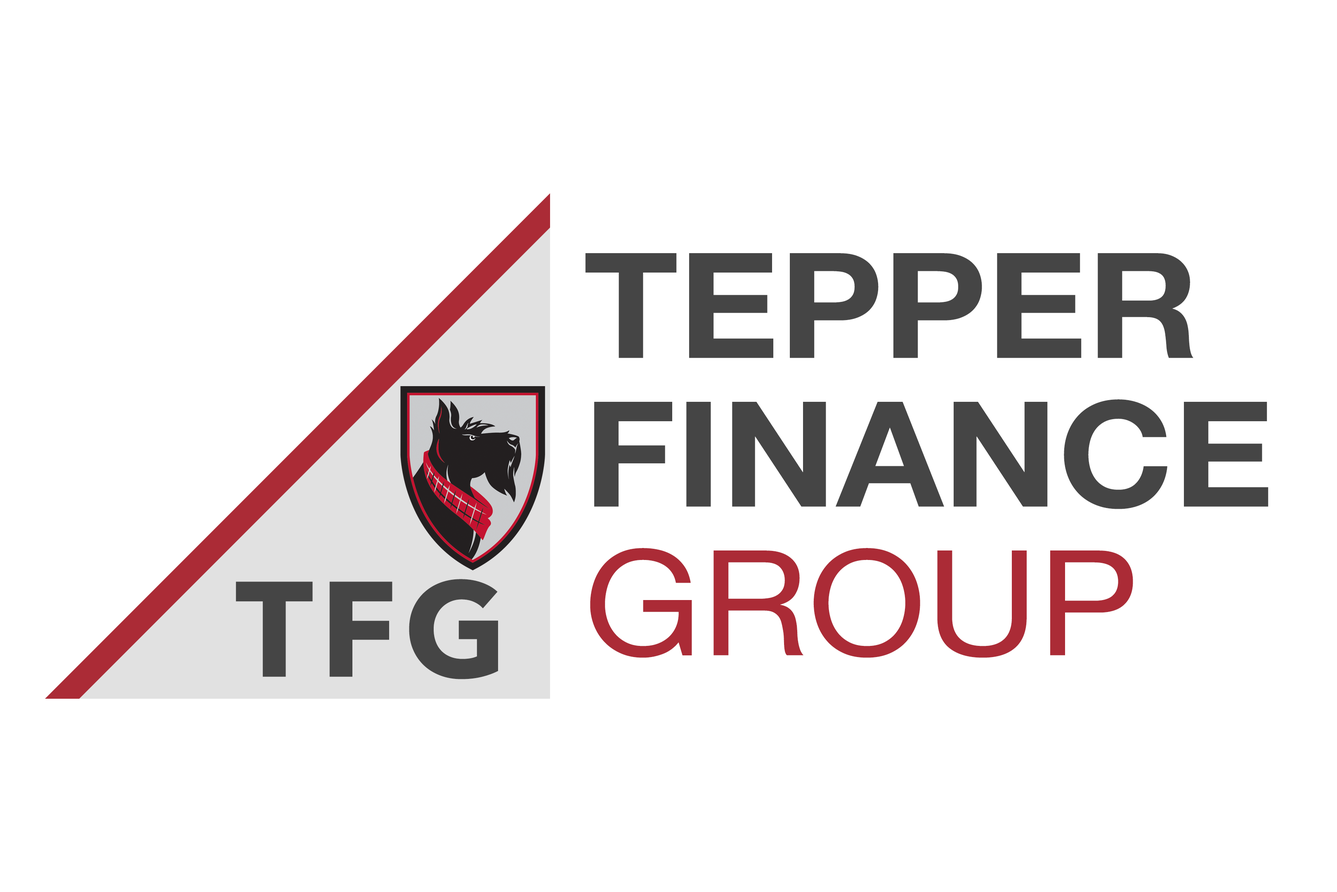
<style>
.page{position:relative;width:1337px;height:892px;background:#ffffff}
.page>*{position:absolute;margin:0}
.t1{font:146.5px/148.6px "HelveticaNeue-Bold";color:#454545;scale:1.06 1}
.t2{font:146.5px/148.6px "HelveticaNeue";color:#ab2b36;scale:1.06 1}
.t3{font:134.2px "AvenirNext-Bold";letter-spacing:0.05em;color:#454545}
</style>
<div class="page">
<p class="t1" style="left:585px;top:253px;width:684px;height:405px">TEPPER<br>FINANCE<br><span class="t2">GROUP</span></p>
<p class="t3" style="left:236px;top:579px;width:262px;height:100px">TFG</p>
</div>
